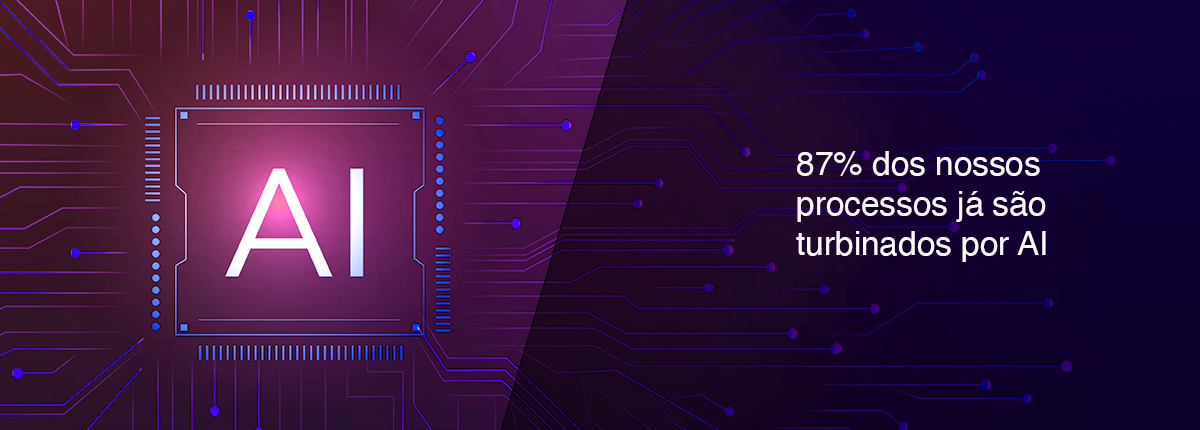
<style>
.page{position:relative;width:1200px;height:430px}
.page>*{position:absolute;margin:0}
.t1{font:33.3px "Helvetica";color:#fbf8f8}
</style>
<div class="page">
<p class="t1" style="left:796px;top:151px;width:250px;height:111px">87% dos nossos <br>processos já são<br>turbinados por AI</p>
</div>
